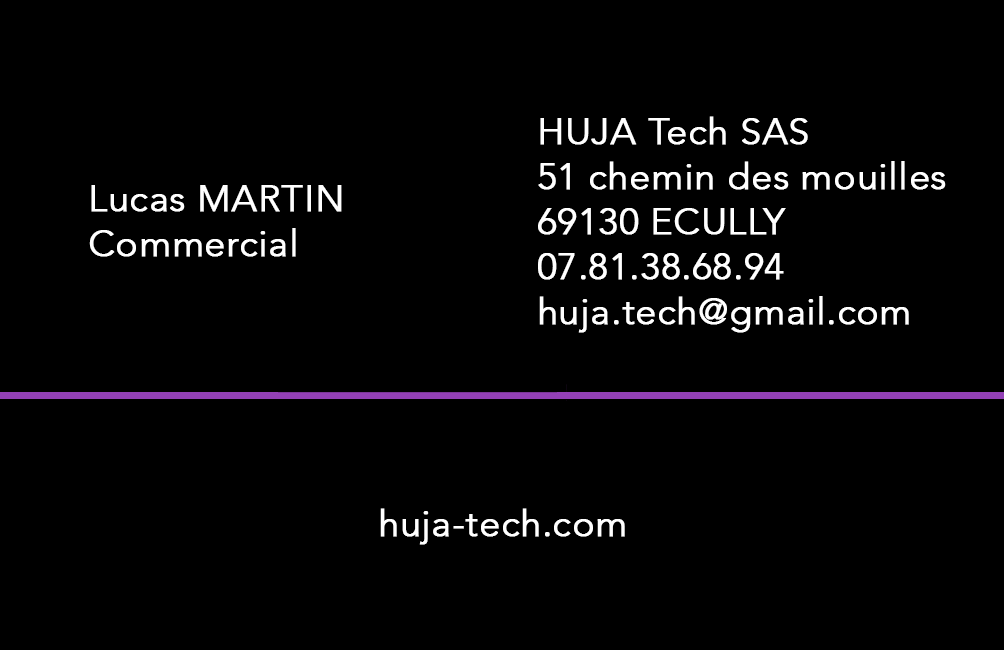
<style>
.page{position:relative;width:1004px;height:650px;background:#000000}
.page>*{position:absolute;margin:0}
.t1{font:37.5px "Avenir-Light";color:#ffffff;font-weight:bold}
</style>
<div class="page">
<p class="t1" style="left:538px;top:116px;width:408px;height:217px">HUJA Tech SAS<br>51 chemin des mouilles<br>69130 ECULLY<br>07.81.38.68.94<br>huja.tech@gmail.com</p>
<p class="t1" style="left:89px;top:185px;width:253px;height:72px">Lucas MARTIN<br>Commercial</p>
<p class="t1" style="left:380px;top:508px;width:245px;height:37px">huja-tech.com</p>
</div>
